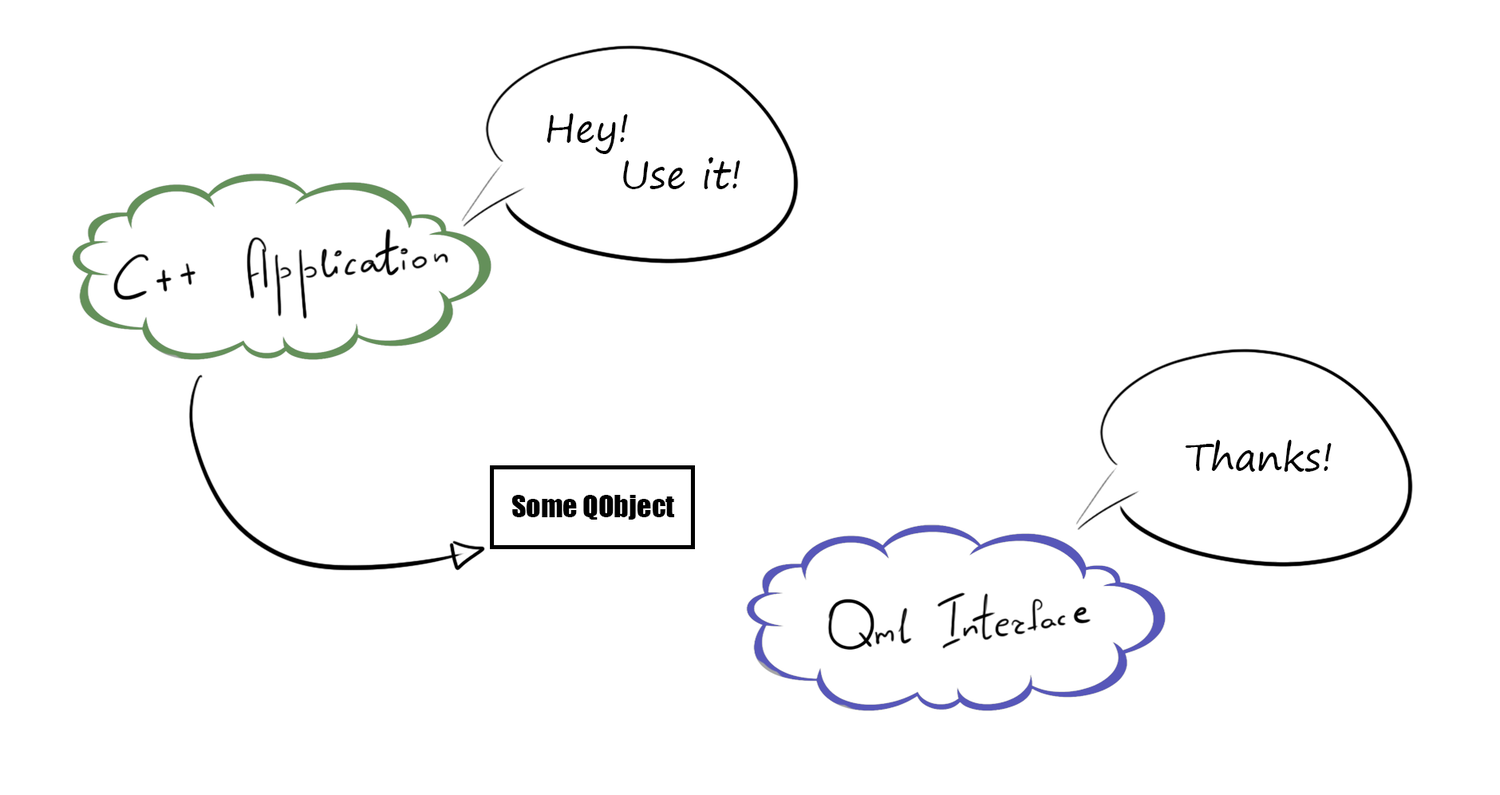
<style>
.page{position:relative;width:1500px;height:795px;background:#ffffff}
.page>*{position:absolute;margin:0}
.t1{font:38.3px "SegoePrint";color:#000000}
.t2{font:28.7px "Impact";color:#000000}
</style>
<div class="page">
<p class="t1" style="left:547px;top:113px;width:194px;height:76px">Hey!<br> Use it!</p>
<p class="t1" style="left:1185px;top:440px;width:147px;height:32px">Thanks!</p>
<p class="t2" style="left:512px;top:495px;width:162px;height:25px">Some QObject</p>
</div>
